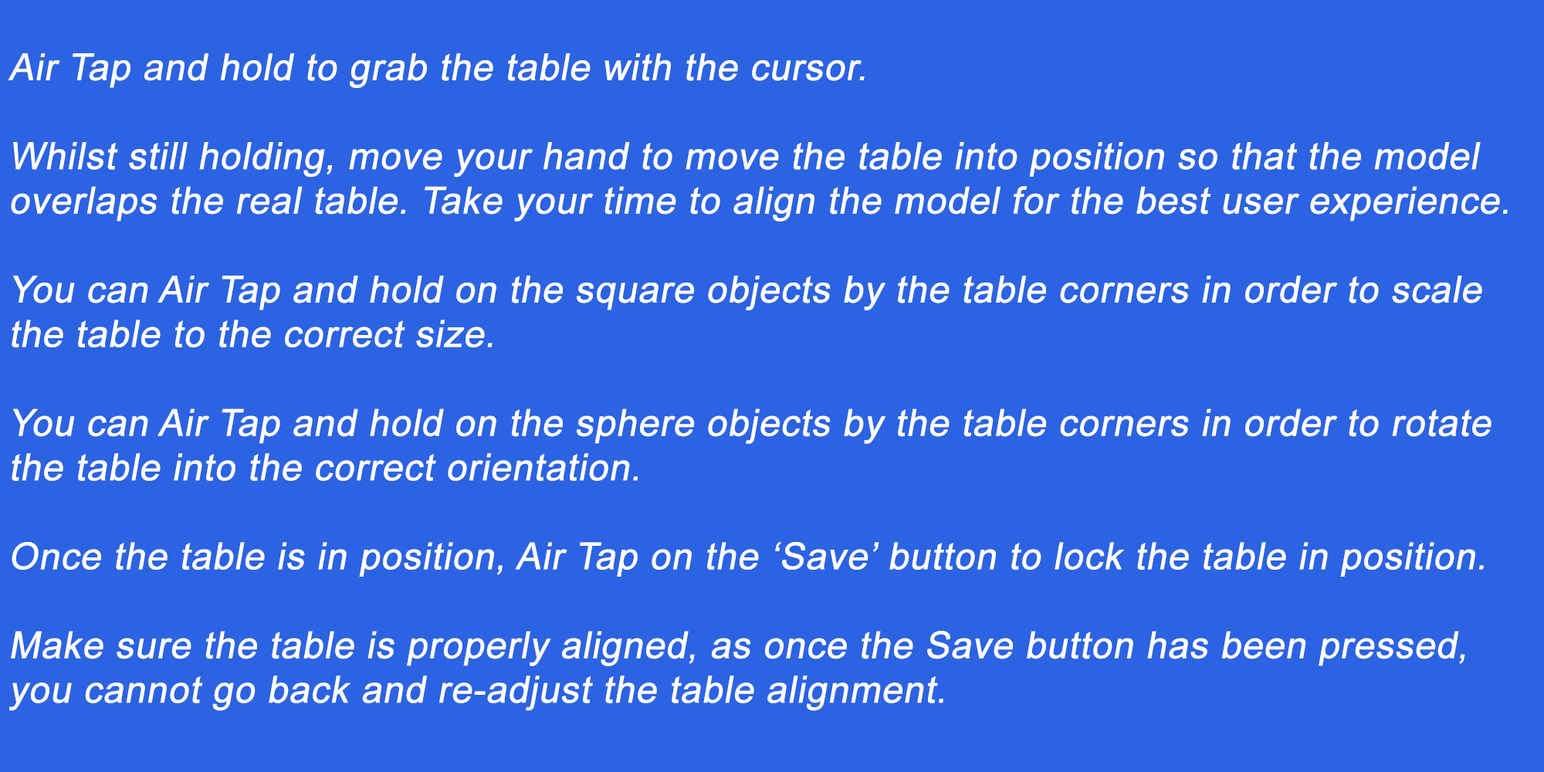
<style>
.page{position:relative;width:1544px;height:772px;background:#2b63e2}
.page>*{position:absolute;margin:0}
.t1{font:37.1px "ArialMT";color:#ffffff;font-weight:bold;font-style:italic}
.t2{font:37.1px "ArialMT";color:#000000;font-weight:bold;font-style:italic}
</style>
<div class="page">
<p class="t1" style="left:8px;top:53px;width:1500px;height:658px;text-align:center"><span class="t2"><br></span>Air Tap and hold to grab the table with the cursor. <br><br>Whilst still holding, move your hand to move the table into position so that the model overlaps the real table. Take your time to align the model for the best user experience.<br><br>You can Air Tap and hold on the square objects by the table corners in order to scale the table to the correct size.<br><br>You can Air Tap and hold on the sphere objects by the table corners in order to rotate the table into the correct orientation.<br><br>Once the table is in position, Air Tap on the ‘Save’ button to lock the table in position. <br><br>Make sure the table is properly aligned, as once the Save button has been pressed, you cannot go back and re-adjust the table alignment.</p>
</div>
